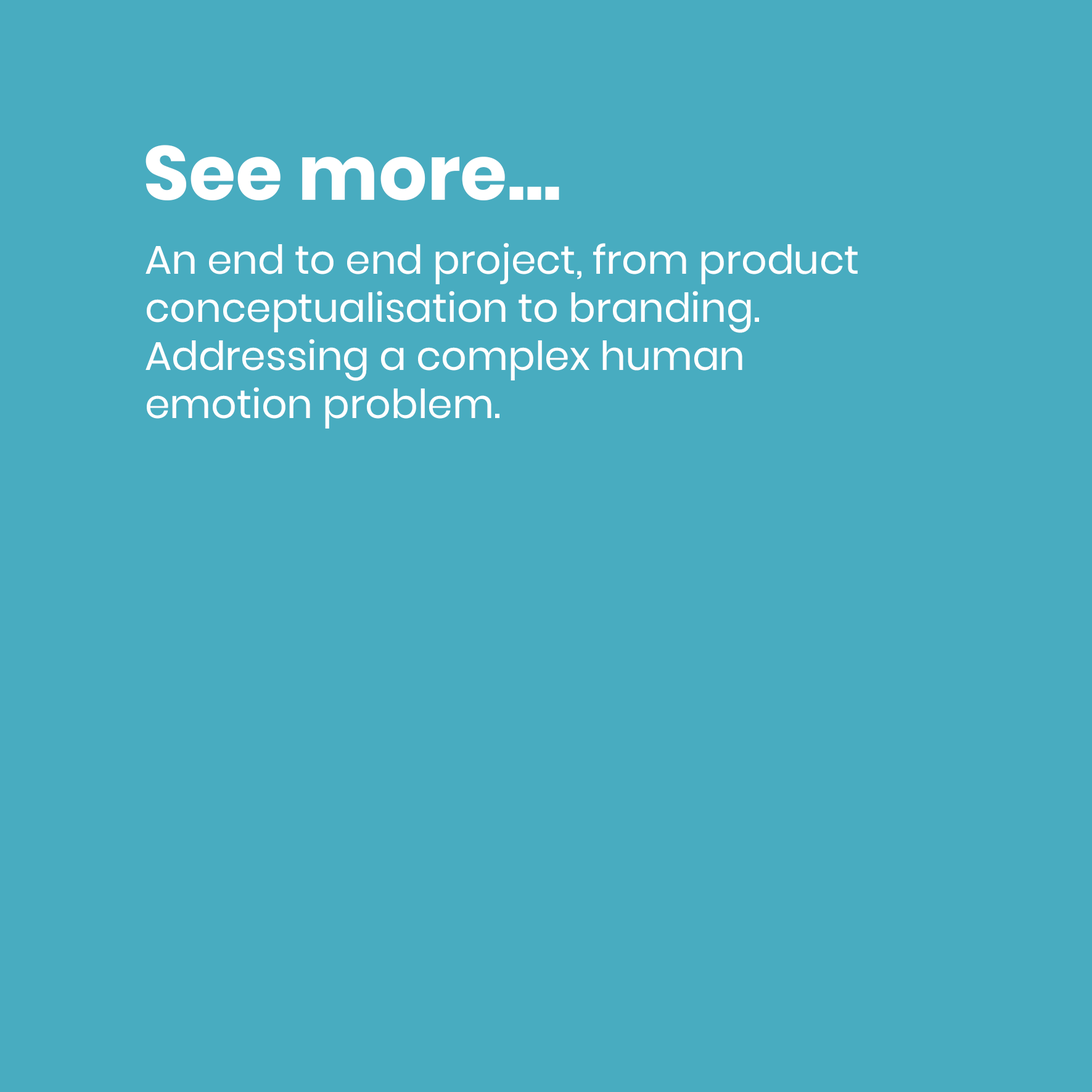
<style>
.page{position:relative;width:1092px;height:1092px;background:#48acc0}
.page>*{position:absolute;margin:0}
.t1{font:76px "Poppins-Bold";color:#ffffff}
.t2{font:40.1px "Poppins-Regular";color:#ffffff}
</style>
<div class="page">
<p class="t1" style="left:146px;top:145px;width:413px;height:55px">See more...</p>
<p class="t2" style="left:146px;top:243px;width:712px;height:186px">An end to end project, from product<br>conceptualisation to branding.<br>Addressing a complex human<br>emotion problem.</p>
</div>
